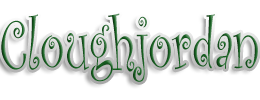
<style>
.page{position:relative;width:260px;height:100px;background:#ffffff}
.page>*{position:absolute;margin:0}
.t1{font:71.7px "CurlzMT";color:#186122;scale:0.72 1}
</style>
<div class="page">
<p class="t1" style="left:1px;top:13px;width:257px;height:69px">Cloughjordan</p>
</div>
